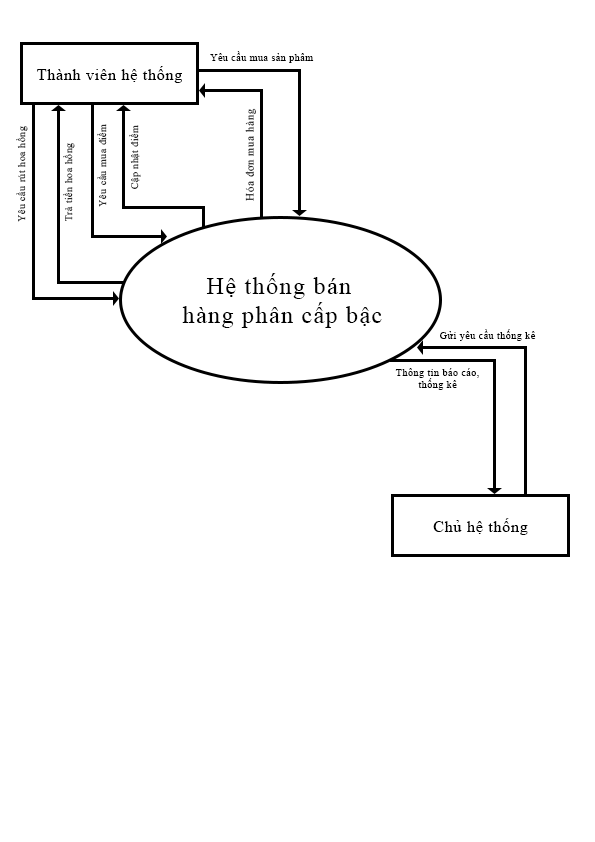
<style>
.page{position:relative;width:595px;height:842px;background:#ffffff}
.page>*{position:absolute;margin:0}
.t1{font:10px "TimesNewRomanPSMT";letter-spacing:0.05em;color:#000000}
.t2{font:15.9px "TimesNewRomanPSMT";letter-spacing:0.05em;color:#000000}
.t3{font:11px "TimesNewRomanPSMT";letter-spacing:0.05em}
.t4{font:10px "TimesNewRomanPSMT";letter-spacing:0.05em}
.t5{font:24.3px "TimesNewRomanPSMT";letter-spacing:0.05em;color:#000000}
</style>
<div class="page">
<p class="t1" style="left:210px;top:51px;width:104px;height:12px">Yêu cầu mua sản phẩm</p>
<p class="t2" style="left:37px;top:66px;width:145px;height:17px">Thành viên hệ thống</p>
<p class="t3" style="left:245px;top:108px;width:11px;height:93px;rotate:-90deg">Hóa đơn mua hàng</p>
<p class="t4" style="left:16px;top:126px;width:12px;height:96px;rotate:-90deg">Yêu cầu rút hoa hồng</p>
<p class="t4" style="left:97px;top:124px;width:10px;height:83px;rotate:-90deg">Yêu cầu mua điểm</p>
<p class="t4" style="left:129px;top:125px;width:12px;height:64px;rotate:-90deg">Cập nhật điểm</p>
<p class="t4" style="left:63px;top:143px;width:12px;height:78px;rotate:-90deg">Trả tiền hoa hồng</p>
<p class="t5" style="left:182px;top:273px;width:200px;height:55px;text-align:center">Hệ thống bán <br>hàng phân cấp bậc</p>
<p class="t1" style="left:440px;top:329px;width:96px;height:12px">Gửi yêu cầu thống kê</p>
<p class="t1" style="left:395px;top:368px;width:84px;height:22px;text-align:center">Thông tin báo cáo,<br>thống kê</p>
<p class="t2" style="left:433px;top:518px;width:95px;height:17px">Chủ hệ thống</p>
</div>
